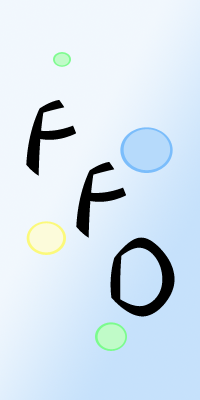
<style>
.page{position:relative;width:200px;height:400px}
.page>*{position:absolute;margin:0}
.t1{font:72px "Tahoma";color:#000000}
</style>
<div class="page">
<p class="t1" style="left:26px;top:100px;width:50px;height:76px">F</p>
<p class="t1" style="left:76px;top:162px;width:50px;height:76px">F</p>
<p class="t1" style="left:110px;top:237px;width:65px;height:80px">D</p>
</div>
